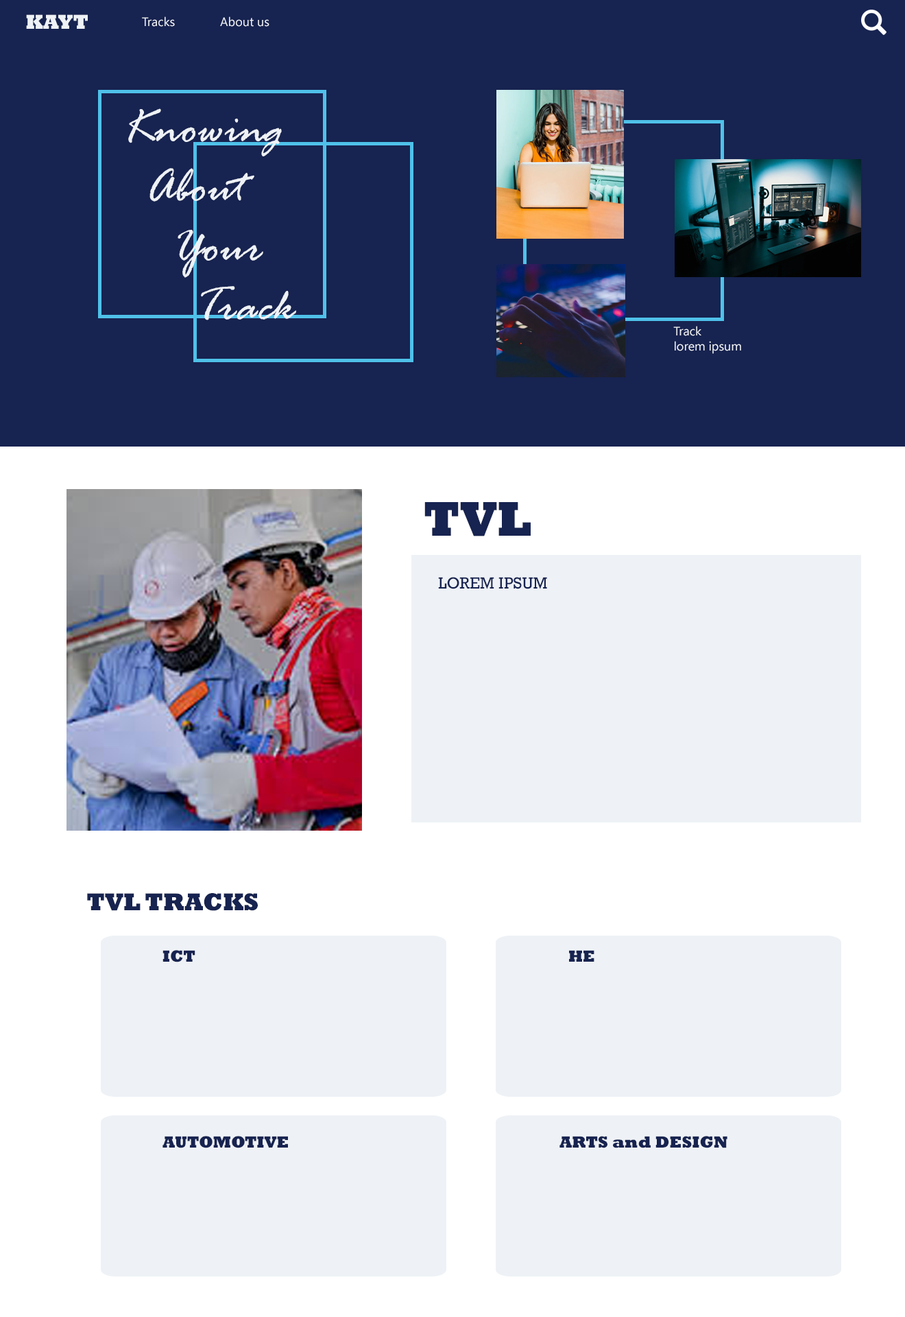
<style>
.page{position:relative;width:905px;height:1317px;background:#172350}
.page>*{position:absolute;margin:0}
.t1{font:20.6px "Rockwell-ExtraBold";color:#eef2f6}
.t2{font:12.3px "SegoeUI";color:#eef2f6}
.t3{font:49.4px "RageItalic";color:#eef2f6}
.t4{font:49.4px "Rockwell-ExtraBold";color:#172350}
.t5{font:16.5px "Rockwell";color:#172350}
.t6{font:24.7px "Rockwell-ExtraBold";color:#172350}
.t7{font:16.5px "Rockwell-ExtraBold";color:#172350}
</style>
<div class="page">
<p class="t1" style="left:26px;top:14px;width:62px;height:15px">KAYT</p>
<p class="t2" style="left:142px;top:16px;width:33px;height:11px">Tracks</p>
<p class="t2" style="left:220px;top:16px;width:50px;height:11px">About us</p>
<p class="t3" style="left:128px;top:108px;width:168px;height:212px">Knowing <br> About <br>  Your<br>   Track</p>
<p class="t2" style="left:674px;top:326px;width:67px;height:28px">Track<br>lorem ipsum</p>
<p class="t4" style="left:425px;top:502px;width:106px;height:34px">TVL</p>
<p class="t5" style="left:438px;top:577px;width:109px;height:12px">LOREM IPSUM</p>
<p class="t6" style="left:87px;top:893px;width:171px;height:18px">TVL TRACKS</p>
<p class="t7" style="left:163px;top:950px;width:32px;height:12px">ICT</p>
<p class="t7" style="left:569px;top:950px;width:26px;height:12px">HE</p>
<p class="t7" style="left:163px;top:1136px;width:125px;height:12px">AUTOMOTIVE</p>
<p class="t7" style="left:560px;top:1136px;width:168px;height:12px">ARTS and DESIGN</p>
</div>
